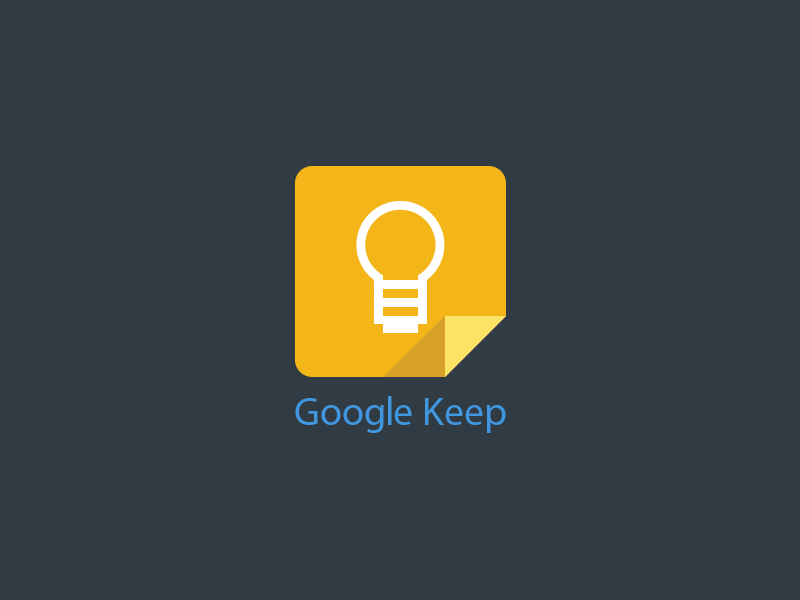
<style>
.page{position:relative;width:800px;height:600px;background:#313b43}
.page>*{position:absolute;margin:0}
.t1{font:40px "MyriadPro-Regular";color:#4097e0}
</style>
<div class="page">
<p class="t1" style="left:295px;top:396px;width:211px;height:37px">Google Keep</p>
</div>
